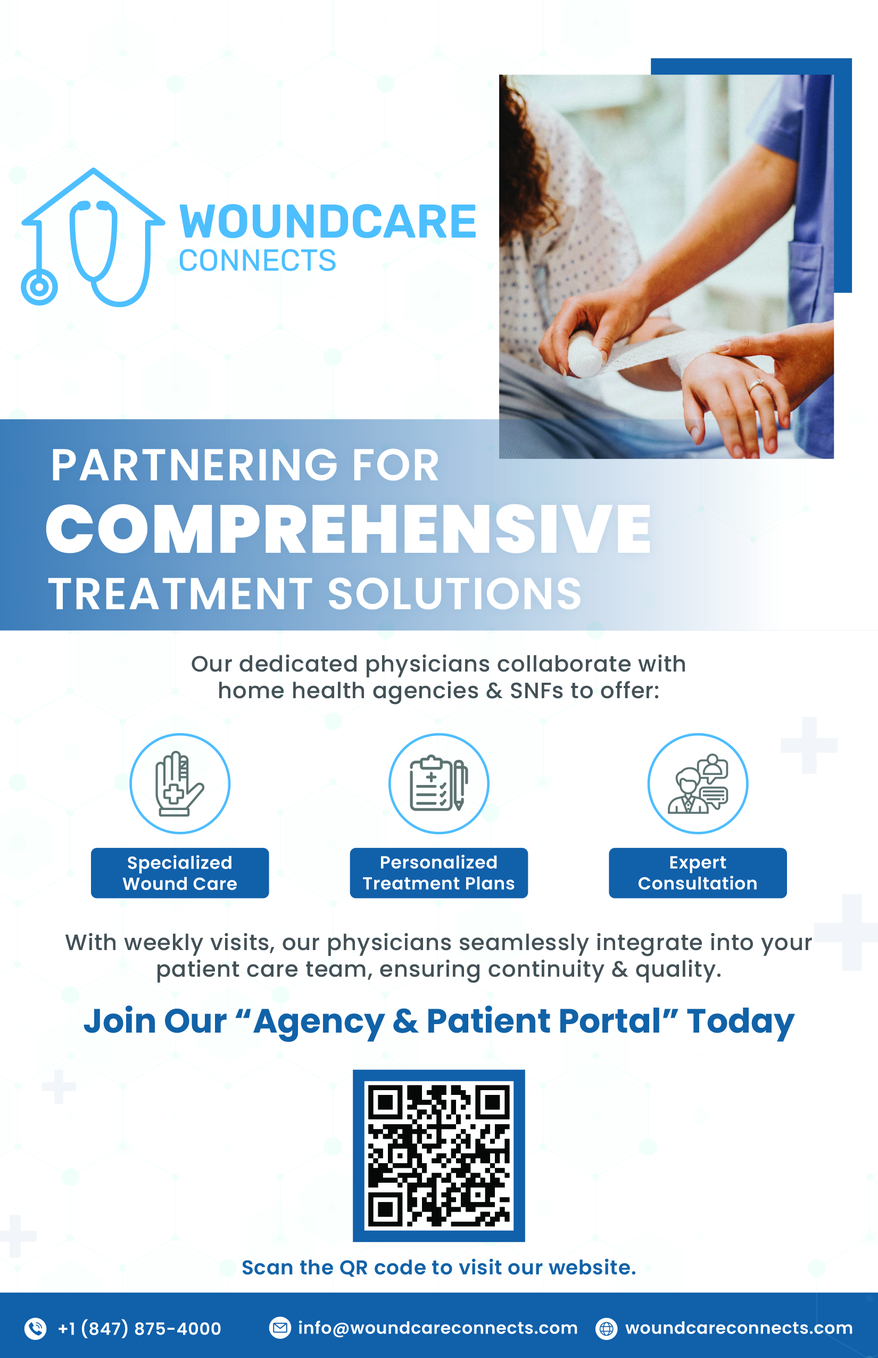
<style>
.page{position:relative;width:878px;height:1358px;background:#ffffff}
.page>*{position:absolute;margin:0}
.t1{font:44.7px "Poppins-SemiBold";letter-spacing:0.025em;color:#ffffff;text-transform:uppercase}
.t2{font:67.6px "Poppins-Black";letter-spacing:0.025em;color:#ffffff;text-transform:uppercase}
.t3{font:22.2px "Poppins-Medium";letter-spacing:0.025em;color:#435157}
.t4{font:33.7px "Poppins-Bold";color:#1162a8}
.t5{font:20px "Poppins-SemiBold";letter-spacing:0.025em;color:#1162a8}
</style>
<div class="page">
<p class="t1" style="left:53px;top:448px;width:386px;height:33px">Partnering for</p>
<p class="t2" style="left:46px;top:504px;width:605px;height:49px">Comprehensive</p>
<p class="t1" style="left:48px;top:577px;width:533px;height:33px">Treatment Solutions</p>
<p class="t3" style="left:192px;top:654px;width:493px;height:50px;text-align:center">Our dedicated physicians collaborate with<br>home health agencies &amp; SNFs to offer:</p>
<p class="t3" style="left:65px;top:933px;width:747px;height:50px;text-align:center">With weekly visits, our physicians seamlessly integrate into your<br>patient care team, ensuring continuity &amp; quality.</p>
<p class="t4" style="left:84px;top:1005px;width:711px;height:37px">Join Our “Agency &amp; Patient Portal” Today</p>
<p class="t5" style="left:243px;top:1258px;width:393px;height:19px">Scan the QR code to visit our website.</p>
</div>
